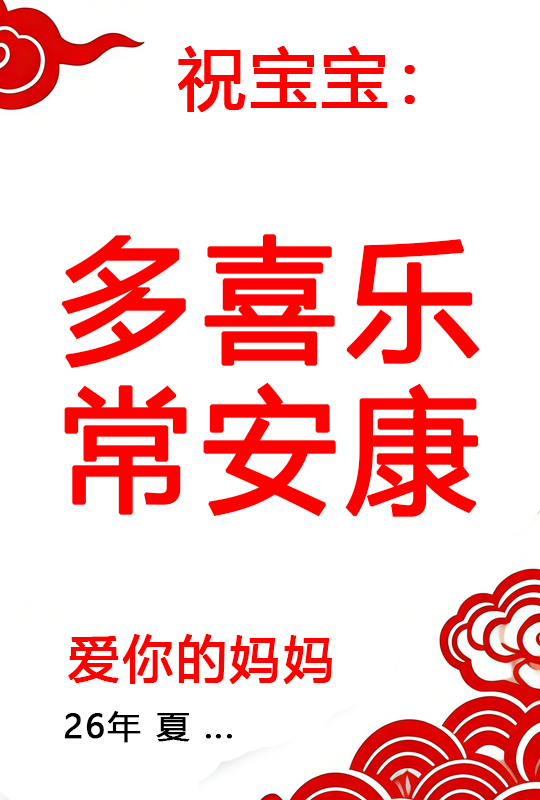
<style>
.page{position:relative;width:540px;height:800px;background:#ffffff}
.page>*{position:absolute;margin:0}
.t1{font:66.7px "MicrosoftYaHei";letter-spacing:0.05em;color:#ff0000;font-weight:bold}
.t2{font:133.3px/150px "MicrosoftYaHei";letter-spacing:0.05em;color:#ff0000;font-weight:bold}
.t3{font:50px "MicrosoftYaHei";letter-spacing:0.05em;color:#ff0000;font-weight:bold}
.t4{font:33.3px "MicrosoftYaHei";letter-spacing:0.05em;color:#000000;font-weight:bold}
</style>
<div class="page">
<p class="t1" style="left:178px;top:46px;width:237px;height:66px">祝宝宝：</p>
<p class="t2" style="left:61px;top:234px;width:419px;height:283px;text-align:center">多喜乐<br>常安康</p>
<p class="t3" style="left:68px;top:634px;width:264px;height:50px">爱你的妈妈</p>
<p class="t4" style="left:64px;top:711px;width:168px;height:32px">26年 夏 ...</p>
</div>
